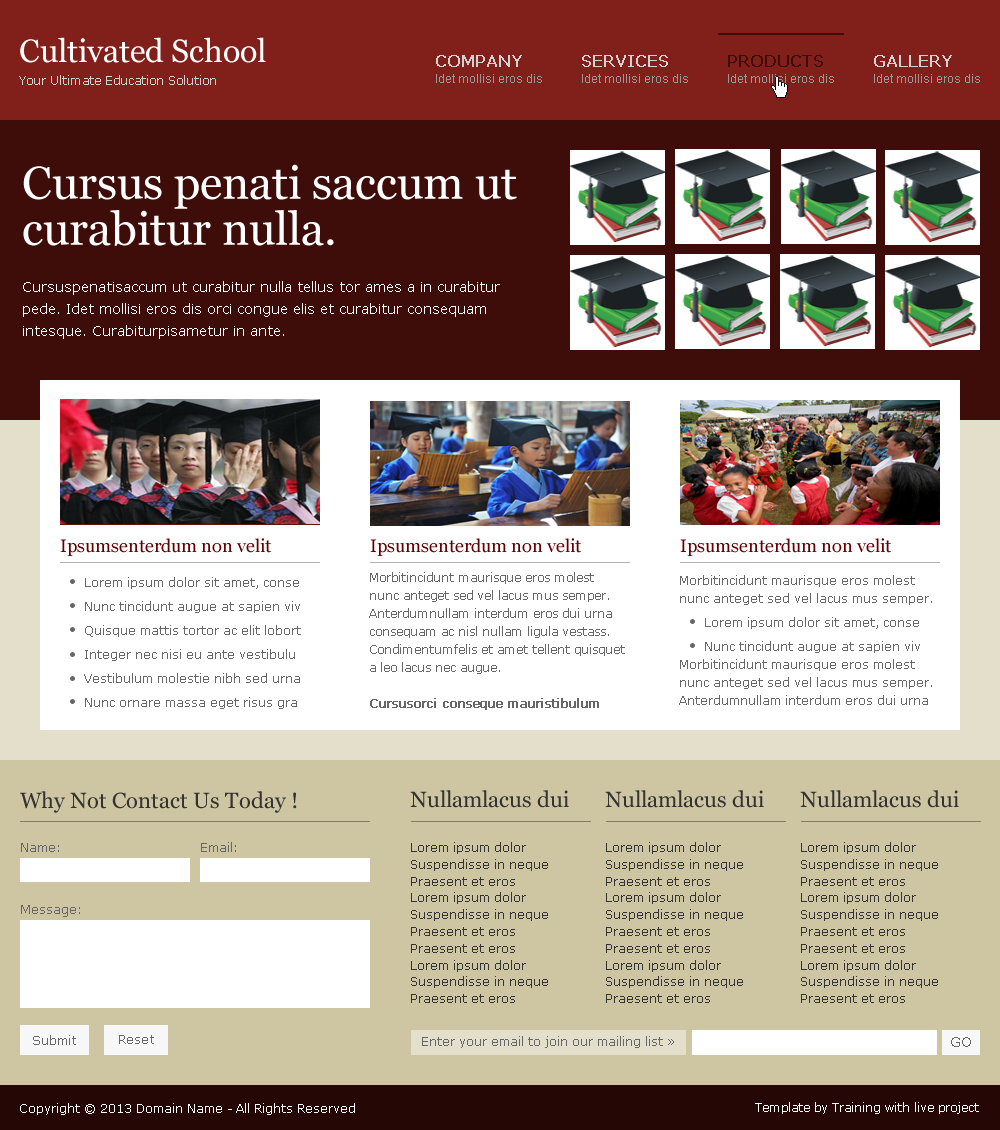
<style>
.page{position:relative;width:1000px;height:1130px;background:#ffffff}
.page>*{position:absolute;margin:0}
.t1{font:32px "Georgia";color:#ffffff}
.t2{font:16px "Verdana";color:#d2d2d2;font-weight:bold}
.t3{font:16px "Verdana";color:#3e0d09;font-weight:bold}
.t4{font:12px "Verdana";color:#d2d2d2}
.t5{font:12px "ArialMT";color:#999999}
.t6{font:46px/46px "Georgia";color:#ffffff}
.t7{font:14px/22.4px "Verdana";color:#ffffff}
.t8{font:18px "Georgia";color:#660000}
.t9{font:12px/24px "Verdana";color:#666666}
.t10{font:12px/18px "Verdana";color:#666666}
.t11{font:12px/18px "Verdana";color:#666666;font-weight:bold}
.t12{font:22px "Georgia";color:#333333}
.t13{font:13px "Verdana";color:#666666}
.t14{font:12px/16.8px "Verdana";color:#333333}
.t15{font:12px "Verdana";color:#666666}
.t16{font:14px "Verdana";color:#666666}
.t17{font:12px "Verdana";color:#ffffff}
</style>
<div class="page">
<p class="t1" style="left:20px;top:37px;width:246px;height:26px">Cultivated School</p>
<p class="t2" style="left:436px;top:55px;width:86px;height:12px">COMPANY</p>
<p class="t2" style="left:582px;top:55px;width:86px;height:12px">SERVICES</p>
<p class="t3" style="left:728px;top:55px;width:95px;height:12px">PRODUCTS</p>
<p class="t2" style="left:874px;top:55px;width:78px;height:12px">GALLERY</p>
<p class="t4" style="left:19px;top:75px;width:197px;height:10px">Your Ultimate Education Solution</p>
<p class="t5" style="left:436px;top:74px;width:106px;height:9px">Idet mollisi eros dis</p>
<p class="t5" style="left:582px;top:74px;width:106px;height:9px">Idet mollisi eros dis</p>
<p class="t5" style="left:728px;top:74px;width:106px;height:9px">Idet mollisi eros dis</p>
<p class="t5" style="left:874px;top:74px;width:106px;height:9px">Idet mollisi eros dis</p>
<p class="t6" style="left:23px;top:164px;width:494px;height:82px">Cursus penati saccum ut curabitur nulla.</p>
<p class="t7" style="left:23px;top:281px;width:477px;height:58px">Cursuspenatisaccum ut curabitur nulla tellus tor ames a in curabitur pede. Idet mollisi eros dis orci congue elis et curabitur consequam intesque. Curabiturpisametur in ante.</p>
<p class="t8" style="left:60px;top:538px;width:211px;height:18px">Ipsumsenterdum non velit</p>
<p class="t8" style="left:370px;top:538px;width:211px;height:18px">Ipsumsenterdum non velit</p>
<p class="t8" style="left:680px;top:538px;width:211px;height:18px">Ipsumsenterdum non velit</p>
<p class="t9" style="left:84px;top:577px;width:217px;height:132px">Lorem ipsum dolor sit amet, conse<br>Nunc tincidunt augue at sapien viv<br>Quisque mattis tortor ac elit lobort<br>Integer nec nisi eu ante vestibulu <br>Vestibulum molestie nibh sed urna <br>Nunc ornare massa eget risus gra</p>
<p class="t10" style="left:369px;top:572px;width:256px;height:138px">Morbitincidunt maurisque eros molest nunc anteget sed vel lacus mus semper. Anterdumnullam interdum eros dui urna consequam ac nisl nullam ligula vestass. Condimentumfelis et amet tellent quisquet a leo lacus nec augue.<br><br><span class="t11">Cursusorci conseque mauristibulum</span></p>
<p class="t10" style="left:680px;top:575px;width:252px;height:30px">Morbitincidunt maurisque eros molest nunc anteget sed vel lacus mus semper.</p>
<p class="t9" style="left:705px;top:617px;width:215px;height:36px">Lorem ipsum dolor sit amet, conse<br>Nunc tincidunt augue at sapien viv</p>
<p class="t10" style="left:679px;top:659px;width:253px;height:46px">Morbitincidunt maurisque eros molest nunc anteget sed vel lacus mus semper. Anterdumnullam interdum eros dui urna</p>
<p class="t12" style="left:20px;top:791px;width:277px;height:22px">Why Not Contact Us Today !</p>
<p class="t12" style="left:410px;top:790px;width:159px;height:18px">Nullamlacus dui</p>
<p class="t12" style="left:605px;top:790px;width:159px;height:18px">Nullamlacus dui</p>
<p class="t12" style="left:800px;top:790px;width:159px;height:18px">Nullamlacus dui</p>
<p class="t13" style="left:21px;top:843px;width:38px;height:9px">Name:</p>
<p class="t13" style="left:201px;top:842px;width:35px;height:10px">Email:</p>
<p class="t14" style="left:411px;top:842px;width:137px;height:161px">Lorem ipsum dolor<br>Suspendisse in neque<br>Praesent et eros<br>Lorem ipsum dolor<br>Suspendisse in neque<br>Praesent et eros<br>Praesent et eros<br>Lorem ipsum dolor<br>Suspendisse in neque<br>Praesent et eros</p>
<p class="t14" style="left:606px;top:842px;width:137px;height:161px">Lorem ipsum dolor<br>Suspendisse in neque<br>Praesent et eros<br>Lorem ipsum dolor<br>Suspendisse in neque<br>Praesent et eros<br>Praesent et eros<br>Lorem ipsum dolor<br>Suspendisse in neque<br>Praesent et eros</p>
<p class="t14" style="left:801px;top:842px;width:137px;height:161px">Lorem ipsum dolor<br>Suspendisse in neque<br>Praesent et eros<br>Lorem ipsum dolor<br>Suspendisse in neque<br>Praesent et eros<br>Praesent et eros<br>Lorem ipsum dolor<br>Suspendisse in neque<br>Praesent et eros</p>
<p class="t13" style="left:21px;top:905px;width:59px;height:12px">Message:</p>
<p class="t13" style="left:33px;top:1035px;width:43px;height:10px">Submit</p>
<p class="t13" style="left:119px;top:1035px;width:35px;height:9px">Reset</p>
<p class="t15" style="left:422px;top:1036px;width:252px;height:12px">Enter your email to join our mailing list »</p>
<p class="t16" style="left:951px;top:1037px;width:20px;height:10px">GO</p>
<p class="t17" style="left:20px;top:1103px;width:335px;height:12px">Copyright © 2013 Domain Name - All Rights Reserved</p>
<p class="t17" style="left:755px;top:1102px;width:224px;height:12px">Template by Training with live project</p>
</div>
